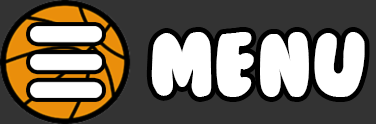
<style>
.page{position:relative;width:376px;height:124px;background:#333333}
.page>*{position:absolute;margin:0}
.t1{font:84px "BubbleGum";color:#ffffff}
</style>
<div class="page">
<p class="t1" style="left:151px;top:32px;width:214px;height:65px">menu</p>
</div>
